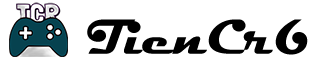
<style>
.page{position:relative;width:319px;height:59px;background:#ffffff}
.page>*{position:absolute;margin:0}
.t1{font:50px "Magneto-Bold";color:#000000}
</style>
<div class="page">
<p class="t1" style="left:87px;top:19px;width:221px;height:36px">TienCr6</p>
</div>
